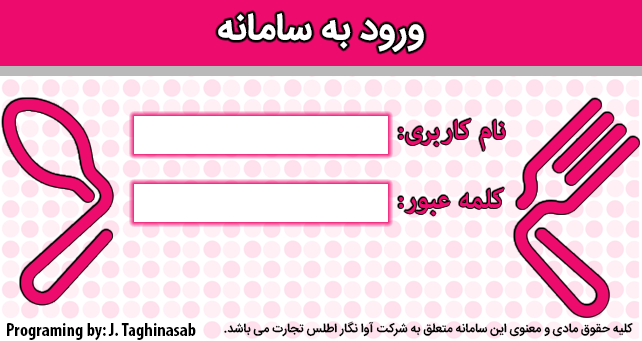
<style>
.page{position:relative;width:642px;height:341px;background:#ffffff}
.page>*{position:absolute;margin:0}
.t1{font:37.5px "IRANSansWeb-Bold";color:#ffffff}
.t2{font:37.5px "AdobeArabic-Bold";color:#ed0c6e}
.t3{font:18.8px "MyriadPro-BoldCond";color:#000000}
.t4{font:12.5px "IRANSansWeb-Bold";color:#000000}
</style>
<div class="page">
<p class="t1" style="left:218px;top:13px;width:206px;height:39px">ورود به سامانه</p>
<p class="t2" style="left:399px;top:119px;width:106px;height:32px">نام کاربری:</p>
<p class="t2" style="left:399px;top:188px;width:105px;height:28px">کلمه عبور:</p>
<p class="t3" style="left:7px;top:323px;width:189px;height:18px">Programing by: J. Taghinasab</p>
<p class="t4" style="left:224px;top:321px;width:409px;height:16px">کلیه حقوق مادی و معنوی این سامانه متعلق به شرکت آوا نگار اطلس تجارت می باشد.</p>
</div>
